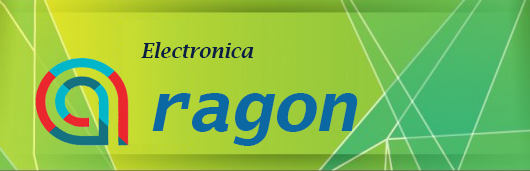
<style>
.page{position:relative;width:530px;height:171px}
.page>*{position:absolute;margin:0}
.t1{font:20px "LucidaBright-DemiItalic";color:#081f43}
.t2{font:70px "LucidaSans-TypewriterBoldOblique";color:#0b68a3}
</style>
<div class="page">
<p class="t1" style="left:141px;top:42px;width:113px;height:16px">Electronica</p>
<p class="t2" style="left:152px;top:93px;width:206px;height:53px">ragon</p>
</div>
